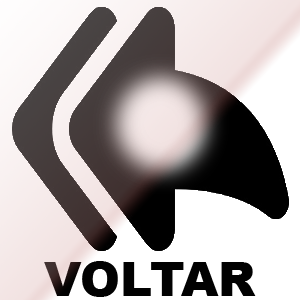
<style>
.page{position:relative;width:300px;height:300px;background:#ffffff}
.page>*{position:absolute;margin:0}
.t1{font:48px "Arial-Black";color:#010101}
</style>
<div class="page">
<p class="t1" style="left:44px;top:261px;width:212px;height:36px">VOLTAR</p>
</div>
